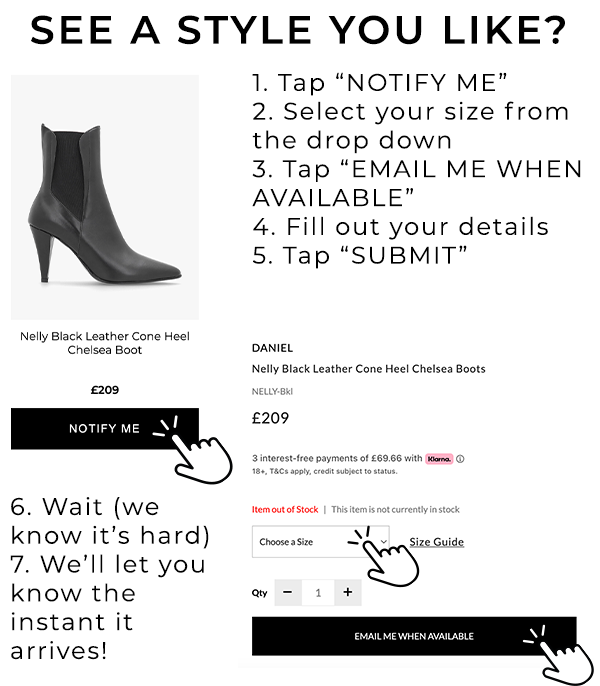
<style>
.page{position:relative;width:600px;height:686px;background:#ffffff}
.page>*{position:absolute;margin:0}
.t1{font:39.5px "Montserrat-SemiBold";letter-spacing:0.075em;color:#000000;text-transform:uppercase}
.t2{font:24px "Montserrat-Regular";letter-spacing:0.075em;color:#000000}
</style>
<div class="page">
<p class="t1" style="left:31px;top:15px;width:534px;height:30px">see a style you like?</p>
<p class="t2" style="left:252px;top:72px;width:329px;height:197px">1. Tap “NOTIFY ME”<br>2. Select your size from the drop down<br>3. Tap “EMAIL ME WHEN AVAILABLE”<br>4. Fill out your details<br>5. Tap “SUBMIT”</p>
<p class="t2" style="left:10px;top:497px;width:199px;height:163px">6. Wait (we know it’s hard)<br>7. We’ll let you know the instant it arrives!</p>
</div>
